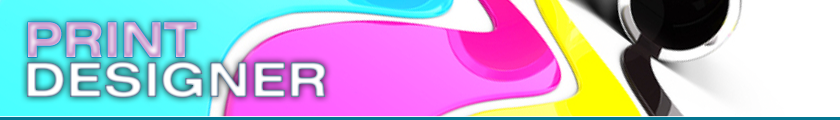
<style>
.page{position:relative;width:840px;height:120px}
.page>*{position:absolute;margin:0}
.t1{font:48px "Swiss721BT-BoldExtended";color:#cb9bce}
.t2{font:48px "Swiss721BT-BoldExtended"}
</style>
<div class="page">
<p class="t1" style="left:28px;top:22px;width:169px;height:35px">PRINT</p>
<p class="t2" style="left:27px;top:61px;width:299px;height:37px">DESIGNER</p>
</div>
